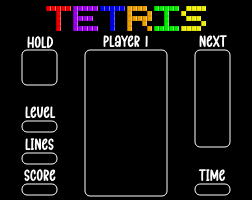
<style>
.page{position:relative;width:252px;height:200px;background:#000000}
.page>*{position:absolute;margin:0}
.t1{font:24px "GoodGhostRegular";color:#ffffff}
</style>
<div class="page">
<p class="t1" style="left:27px;top:36px;width:27px;height:13px">Hold</p>
<p class="t1" style="left:103px;top:34px;width:45px;height:14px">player 1</p>
<p class="t1" style="left:199px;top:34px;width:28px;height:14px">next</p>
<p class="t1" style="left:25px;top:105px;width:31px;height:14px">Level</p>
<p class="t1" style="left:25px;top:138px;width:29px;height:13px">Lines</p>
<p class="t1" style="left:24px;top:169px;width:32px;height:13px">score</p>
<p class="t1" style="left:198px;top:169px;width:28px;height:13px">time</p>
</div>
